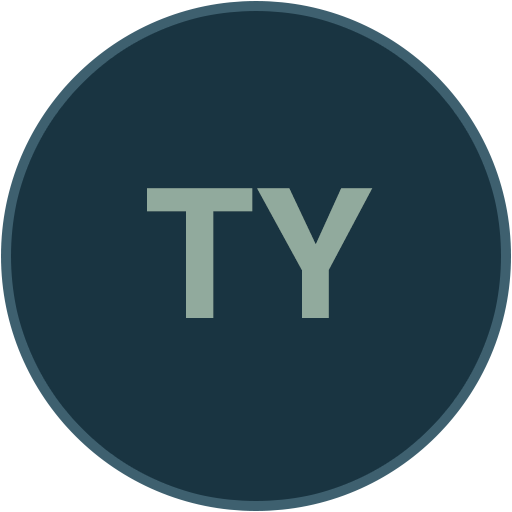
<style>
.page{position:relative;width:512px;height:512px;background:#193441}
.page>*{position:absolute;margin:0}
.t1{font:180px "Helvetica-Bold";color:#91aa9d}
</style>
<div class="page">
<p class="t1" style="left:147px;top:188px;width:226px;height:130px">TY</p>
</div>
